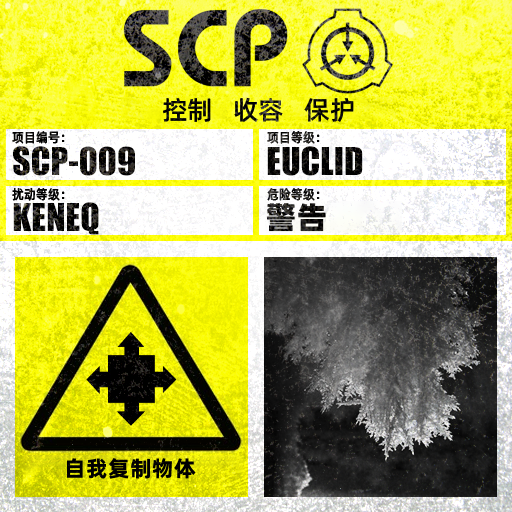
<style>
.page{position:relative;width:512px;height:512px}
.page>*{position:absolute;margin:0}
.t1{font:26px "AlibabaPuHuiTiM";color:#000000}
.t2{font:13.3px "AlibabaPuHuiTiM";letter-spacing:0.02em;color:#000000;scale:0.9 1}
.t3{font:13.3px "AlibabaPuHuiTiM";letter-spacing:0.02em;scale:0.9 1}
.t4{font:30.3px "AlibabaPuHuiTiH";letter-spacing:0.02em}
.t5{font:22px "AlibabaPuHuiTiB";letter-spacing:0.02em;color:#000000}
</style>
<div class="page">
<p class="t1" style="left:163px;top:97px;width:191px;height:26px">控制   收容   保护</p>
<p class="t2" style="left:12px;top:131px;width:53px;height:13px">项目编号：</p>
<p class="t3" style="left:267px;top:131px;width:53px;height:13px">项目等级：</p>
<p class="t2" style="left:12px;top:188px;width:53px;height:13px">扰动等级：</p>
<p class="t3" style="left:267px;top:188px;width:53px;height:13px">危险等级：</p>
<p class="t4" style="left:267px;top:203px;width:59px;height:29px">警告</p>
<p class="t5" style="left:67px;top:458px;width:129px;height:21px">自我复制物体</p>
</div>
